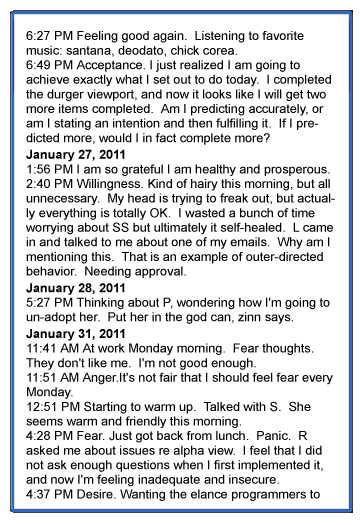
<style>
.page{position:relative;width:360px;height:525px;background:#ffffff}
.page>*{position:absolute;margin:0}
.t1{font:12.5px/14.6px "ArialMT";color:#000000}
.t2{font:12.5px/16.7px "Arial-BoldMT";color:#000000}
</style>
<div class="page">
<p class="t1" style="left:26px;top:31px;width:309px;height:470px">6:27 PM Feeling good again.  Listening to favorite music: santana, deodato, chick corea.<br>6:49 PM Acceptance. I just realized I am going to achieve exactly what I set out to do today.  I completed the durger viewport, and now it looks like I will get two more items completed.  Am I predicting accurately, or am I stating an intention and then fulfilling it.  If I predicted more, would I in fact complete more?<br><span class="t2">January 27, 2011<br></span>1:56 PM I am so grateful I am healthy and prosperous.<br>2:40 PM Willingness. Kind of hairy this morning, but all unnecessary.  My head is trying to freak out, but actually everything is totally OK.  I wasted a bunch of time worrying about SS but ultimately it self-healed.  L came in and talked to me about one of my emails.  Why am I mentioning this.  That is an example of outer-directed behavior.  Needing approval.<br><span class="t2">January 28, 2011<br></span>5:27 PM Thinking about P, wondering how I'm going to un-adopt her.  Put her in the god can, zinn says.  <br><span class="t2">January 31, 2011<br></span>11:41 AM At work Monday morning.  Fear thoughts.  They don't like me.  I'm not good enough.  <br>11:51 AM Anger.It's not fair that I should feel fear every Monday.<br>12:51 PM Starting to warm up.  Talked with S.  She seems warm and friendly this morning.<br>4:28 PM Fear. Just got back from lunch.  Panic.  R asked me about issues re alpha view.  I feel that I did not ask enough questions when I first implemented it, and now I'm feeling inadequate and insecure.<br>4:37 PM Desire. Wanting the elance programmers to get back to me with a proposal.  Antsy.  Nervous.<br>6:07 PM Fear. i don't really feel too fearful, but I know I am, because I just now at some junk candy out of the machine.</p>
</div>
